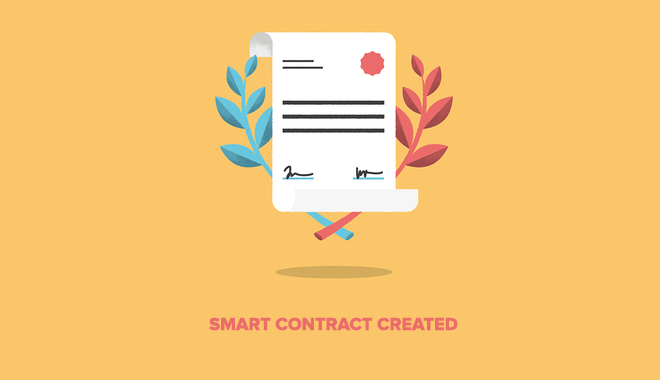
<style>
.page{position:relative;width:660px;height:380px;background:#fbc66a}
.page>*{position:absolute;margin:0}
.t1{font:18px "ProximaNova-Extrabld";color:#ec6c6b}
</style>
<div class="page">
<p class="t1" style="left:209px;top:317px;width:249px;height:14px">SMART CONTRACT CREATED</p>
</div>
